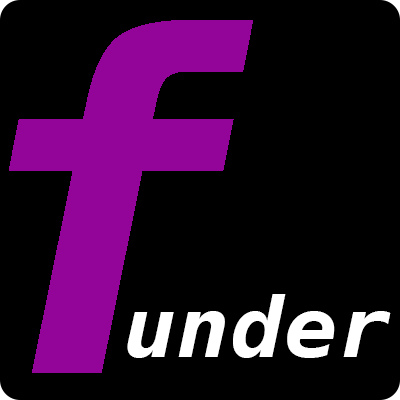
<style>
.page{position:relative;width:400px;height:400px;background:#000000}
.page>*{position:absolute;margin:0}
.t1{font:83.3px "Menlo-BoldItalic";color:#ffffff;scale:1.07 1}
</style>
<div class="page">
<p class="t1" style="left:127px;top:294px;width:264px;height:64px">under</p>
</div>
